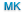
<style>
.page{position:relative;width:22px;height:13px;background:#ffffff}
.page>*{position:absolute;margin:0}
.t1{font:11px "ArialMT";color:#0083b6}
</style>
<div class="page">
<p class="t1" style="left:4px;top:2px;width:17px;height:8px">MK</p>
</div>
